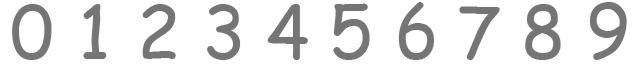
<style>
.page{position:relative;width:640px;height:64px;background:#ffffff}
.page>*{position:absolute;margin:0}
.t1{font:72px "ComicSansMS";color:#757575}
</style>
<div class="page">
<p class="t1" style="left:12px;top:4px;width:40px;height:56px">0</p>
<p class="t1" style="left:83px;top:4px;width:24px;height:55px">1</p>
<p class="t1" style="left:142px;top:4px;width:34px;height:55px">2</p>
<p class="t1" style="left:207px;top:4px;width:33px;height:56px">3</p>
<p class="t1" style="left:267px;top:4px;width:41px;height:56px">4</p>
<p class="t1" style="left:333px;top:3px;width:37px;height:57px">5</p>
<p class="t1" style="left:398px;top:2px;width:36px;height:58px">6</p>
<p class="t1" style="left:459px;top:6px;width:41px;height:54px">7</p>
<p class="t1" style="left:525px;top:4px;width:36px;height:56px">8</p>
<p class="t1" style="left:590px;top:2px;width:37px;height:58px">9</p>
</div>
